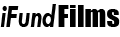
<style>
.page{position:relative;width:120px;height:37px;background:#ffffff}
.page>*{position:absolute;margin:0}
.t1{font:32.6px "TwCenMT-BoldItalic";color:#000000;scale:0.84 1}
.t2{font:28.5px "Impact";color:#000000}
</style>
<div class="page">
<p class="t1" style="left:0px;top:4px;width:56px;height:23px">iFund</p>
<p class="t2" style="left:58px;top:5px;width:62px;height:22px">Films</p>
</div>
